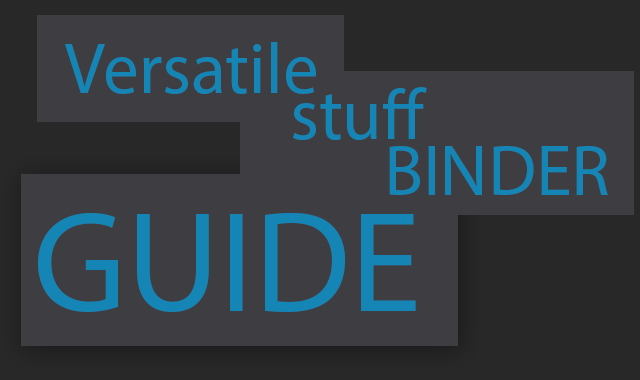
<style>
.page{position:relative;width:640px;height:380px;background:#3e3e42}
.page>*{position:absolute;margin:0}
.t1{font:72px "MyriadPro-Regular";color:#1585b5}
.t2{font:144px "MyriadPro-Regular";color:#1585b5}
</style>
<div class="page">
<p class="t1" style="left:65px;top:42px;width:251px;height:52px">Versatile</p>
<p class="t1" style="left:293px;top:87px;width:134px;height:53px">stuff</p>
<p class="t1" style="left:389px;top:146px;width:219px;height:49px">BINDER</p>
<p class="t2" style="left:38px;top:212px;width:378px;height:100px">GUIDE</p>
</div>
